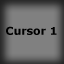
<style>
.page{position:relative;width:64px;height:64px;background:#808080}
.page>*{position:absolute;margin:0}
.t1{font:10.8px "Verdana-Bold";color:#000000}
</style>
<div class="page">
<p class="t1" style="left:6px;top:26px;width:51px;height:9px">Cursor 1</p>
</div>
